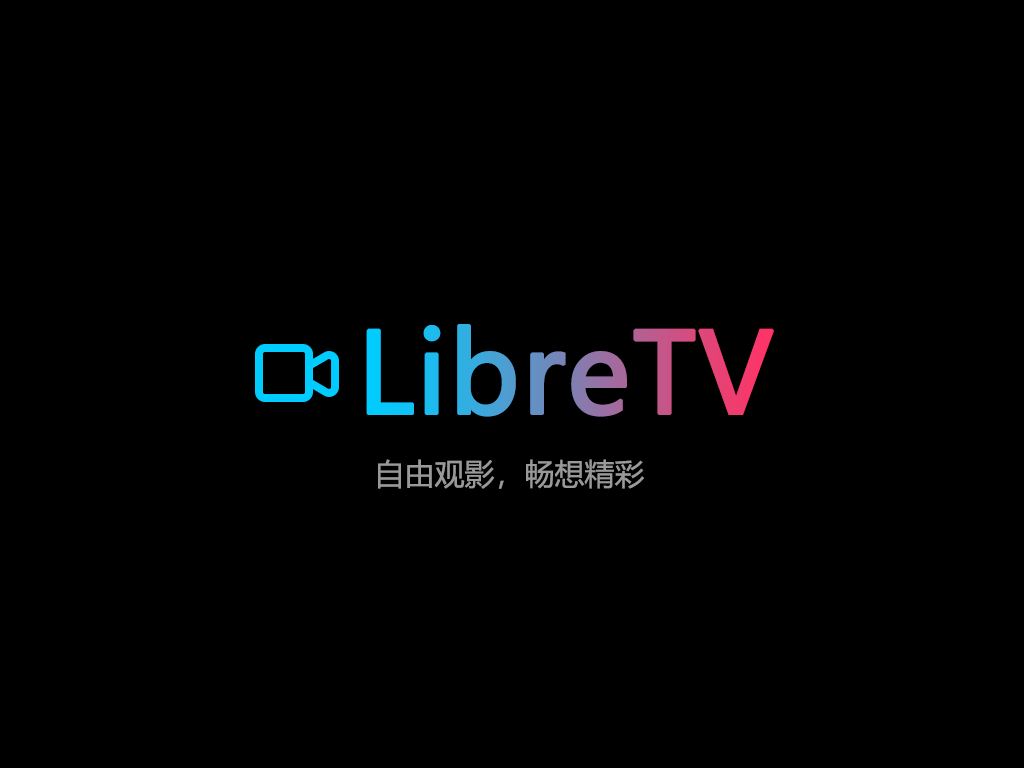
<style>
.page{position:relative;width:1024px;height:768px;background:#000000}
.page>*{position:absolute;margin:0}
.t1{font:110px "MicrosoftYaHei";font-weight:bold}
.t2{font:30px "MicrosoftYaHei";color:#999999}
</style>
<div class="page">
<p class="t1" style="left:366px;top:324px;width:408px;height:93px">LibreTV</p>
<p class="t2" style="left:378px;top:459px;width:266px;height:30px">自由观影，畅想精彩</p>
</div>
